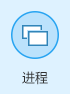
<style>
.page{position:relative;width:70px;height:94px;background:#def2ff}
.page>*{position:absolute;margin:0}
.t1{font:13px "MicrosoftYaHei";color:#323232}
</style>
<div class="page">
<p class="t1" style="left:22px;top:71px;width:26px;height:14px">进程</p>
</div>
